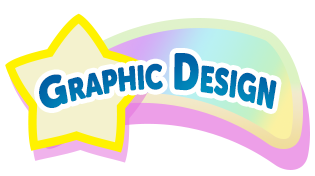
<style>
.page{position:relative;width:315px;height:176px;background:#ffffff}
.page>*{position:absolute;margin:0}
.t1{font:49.7px "MuseoSansRounded-1000";color:#0071ad;font-variant:small-caps;scale:0.72 1}
</style>
<div class="page">
<p class="t1" style="left:39px;top:53px;width:238px;height:56px;rotate:-2deg">Graphic Design</p>
</div>
